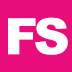
<style>
.page{position:relative;width:72px;height:72px;background:#e80d7b}
.page>*{position:absolute;margin:0}
.t1{font:50.2px "Arial-Black";letter-spacing:-0.08em;color:#fefefe}
</style>
<div class="page">
<p class="t1" style="left:8px;top:17px;width:60px;height:38px">FS</p>
</div>
